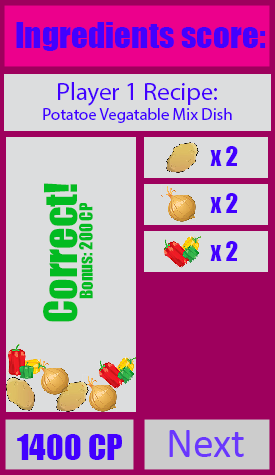
<style>
.page{position:relative;width:275px;height:475px;background:#dcddde}
.page>*{position:absolute;margin:0}
.t1{font:33.3px "Impact";color:#4200ff}
.t2{font:16.7px "MyriadPro-Regular";color:#4200ff}
.t3{font:25px "MyriadPro-Regular";color:#4200ff}
.t4{font:25px "Impact";color:#4200ff}
.t5{font:41.7px "Impact";color:#03bb21}
.t6{font:16.7px "Impact";color:#03bb21}
.t7{font:41.7px "Calibri";color:#6a37fd}
</style>
<div class="page">
<p class="t1" style="left:16px;top:22px;width:250px;height:29px">Ingredients score:</p>
<p class="t2" style="left:43px;top:82px;width:189px;height:41px;text-align:center"><span class="t3">Player 1 Recipe:<br></span>Potatoe Vegatable Mix Dish</p>
<p class="t4" style="left:210px;top:146px;width:28px;height:20px">x 2</p>
<p class="t5" style="left:43px;top:183px;width:35px;height:139px;rotate:-90deg">Correct!</p>
<p class="t4" style="left:210px;top:193px;width:28px;height:20px">x 2</p>
<p class="t6" style="left:79px;top:203px;width:14px;height:96px;rotate:-90deg">Bonus: 200 CP</p>
<p class="t4" style="left:210px;top:241px;width:28px;height:20px">x 2</p>
<p class="t1" style="left:17px;top:434px;width:105px;height:26px">1400 CP</p>
<p class="t7" style="left:169px;top:430px;width:75px;height:27px">Next</p>
</div>
